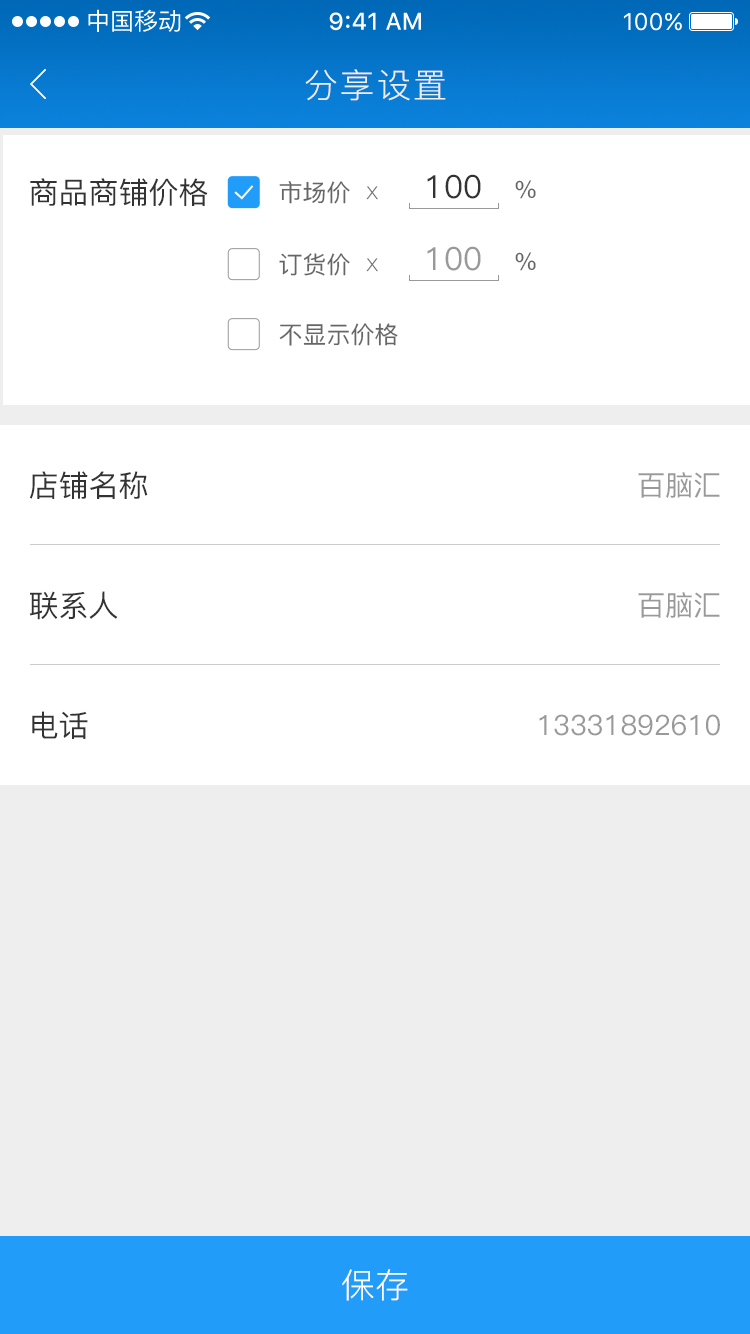
<style>
.page{position:relative;width:750px;height:1334px;background:#ffffff}
.page>*{position:absolute;margin:0}
.t1{font:34px "PingFang-SC-Regular";letter-spacing:0.06em;color:#eeeeee}
.t2{font:32px "PingFang-SC-Medium";color:#333333}
.t3{font:24px "PingFang-SC-Medium";color:#666666}
.t4{font:30px "PingFang-SC-Medium";color:#333333}
.t5{font:24px "PingFang-SC-Light";color:#666666}
.t6{font:32px "PingFang-SC-Medium";color:#999999}
.t7{font:28px "PingFang-SC-Medium";color:#999999}
.t8{font:34px "PingFang-SC-Regular";color:#ffffff}
</style>
<div class="page">
<p class="t1" style="left:305px;top:69px;width:141px;height:32px">分享设置</p>
<p class="t2" style="left:427px;top:174px;width:109px;height:25px">100   <span class="t3">%</span></p>
<p class="t4" style="left:30px;top:178px;width:178px;height:28px">商品商铺价格</p>
<p class="t3" style="left:279px;top:181px;width:99px;height:23px">市场价  <span class="t5">x</span></p>
<p class="t6" style="left:427px;top:246px;width:109px;height:25px">100   <span class="t3">%</span></p>
<p class="t3" style="left:279px;top:253px;width:99px;height:23px">订货价  <span class="t5">x</span></p>
<p class="t3" style="left:279px;top:323px;width:119px;height:23px">不显示价格</p>
<p class="t4" style="left:29px;top:471px;width:119px;height:28px">店铺名称</p>
<p class="t7" style="left:638px;top:472px;width:82px;height:26px">百脑汇</p>
<p class="t4" style="left:29px;top:591px;width:89px;height:29px">联系人</p>
<p class="t7" style="left:638px;top:592px;width:82px;height:26px">百脑汇</p>
<p class="t4" style="left:32px;top:711px;width:56px;height:28px">电话</p>
<p class="t7" style="left:539px;top:714px;width:181px;height:22px">13331892610</p>
<p class="t8" style="left:342px;top:1269px;width:66px;height:32px">保存</p>
</div>
